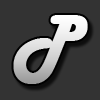
<style>
.page{position:relative;width:100px;height:100px;background:#333333}
.page>*{position:absolute;margin:0}
.t1{font:76.1px "HarlowSolid";text-transform:uppercase;font-weight:bold}
</style>
<div class="page">
<p class="t1" style="left:13px;top:15px;width:75px;height:69px">p</p>
</div>
